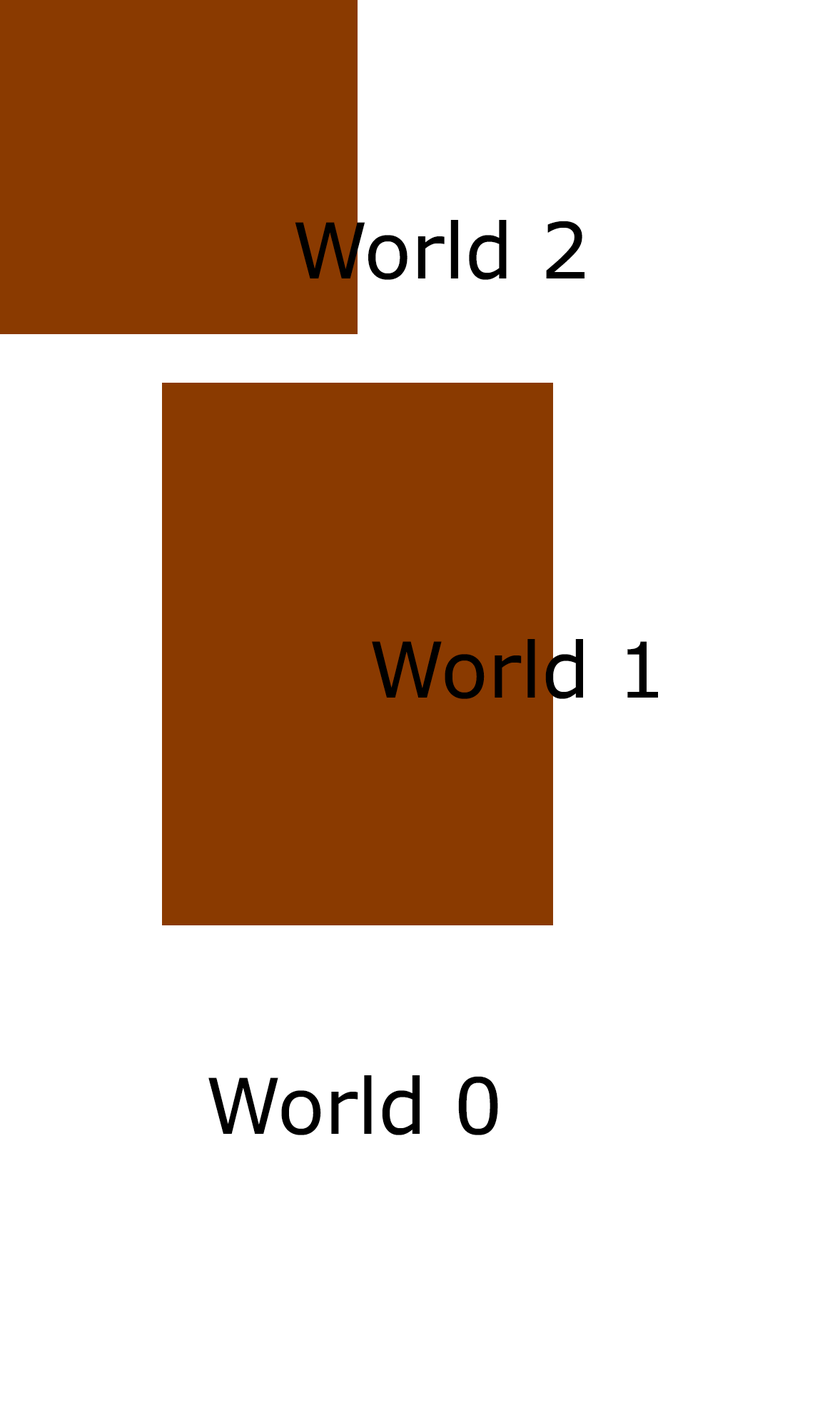
<style>
.page{position:relative;width:835px;height:1428px;background:#ffffff}
.page>*{position:absolute;margin:0}
.t1{font:77.1px "Verdana";color:#000000}
</style>
<div class="page">
<p class="t1" style="left:295px;top:220px;width:290px;height:60px">World 2</p>
<p class="t1" style="left:372px;top:639px;width:286px;height:60px">World 1</p>
<p class="t1" style="left:208px;top:1075px;width:290px;height:60px">World 0</p>
</div>
